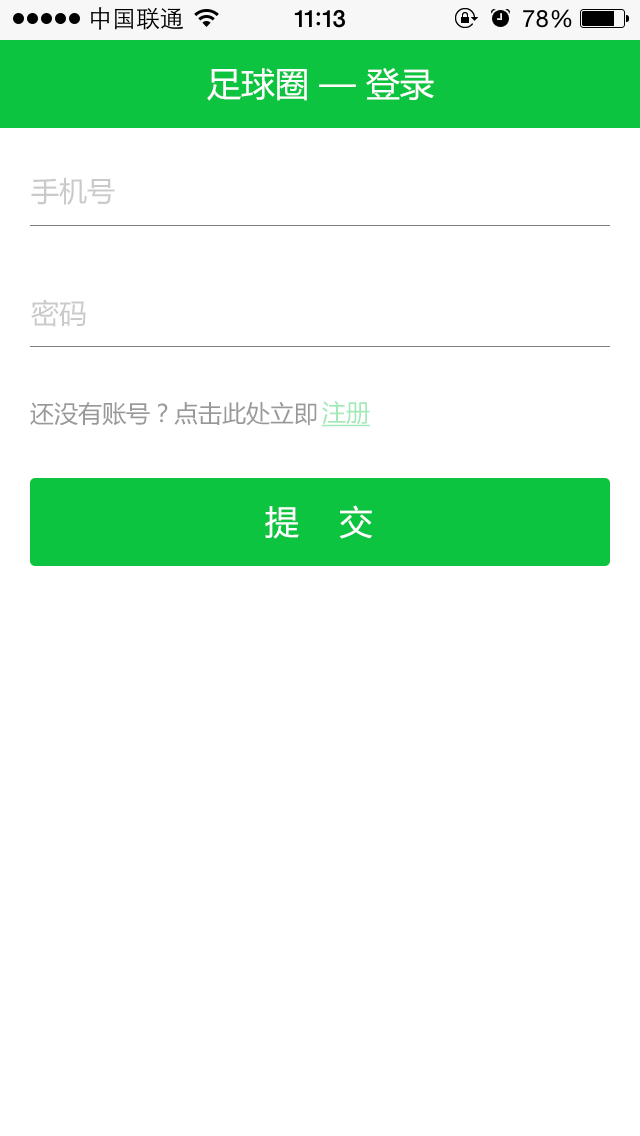
<style>
.page{position:relative;width:640px;height:1136px;background:#ffffff}
.page>*{position:absolute;margin:0}
.t1{font:34px "MicrosoftYaHei";color:#ffffff}
.t2{font:28px "MicrosoftYaHei";color:#cacaca}
.t3{font:24px "MicrosoftYaHei";color:#999999}
.t4{font:24px "MicrosoftYaHei";color:#a3e9b7;text-decoration:underline}
</style>
<div class="page">
<p class="t1" style="left:207px;top:68px;width:227px;height:33px">足球圈 — 登录</p>
<p class="t2" style="left:31px;top:177px;width:84px;height:28px">手机号</p>
<p class="t2" style="left:31px;top:299px;width:55px;height:28px">密码</p>
<p class="t3" style="left:30px;top:401px;width:287px;height:25px">还没有账号？点击此处立即</p>
<p class="t4" style="left:321px;top:400px;width:49px;height:27px">注册</p>
<p class="t1" style="left:265px;top:505px;width:107px;height:34px">提    交</p>
</div>
